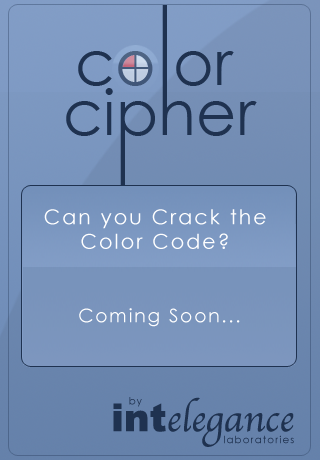
<style>
.page{position:relative;width:320px;height:460px}
.page>*{position:absolute;margin:0}
.t1{font:62.4px "CenturyGothic";color:#1f3250}
.t2{font:20.5px "CenturyGothic";letter-spacing:0.1em;color:#ffffff}
.t3{font:18.6px "CenturyGothic";letter-spacing:0.1em;color:#ffffff}
.t4{font:38.4px "Apple-Chancery";color:#1f3250}
.t5{font:38.4px "Arial-Black";color:#1f3250}
.t6{font:10.4px "CenturyGothic";letter-spacing:0.1em;color:#1f3250}
</style>
<div class="page">
<p class="t1" style="left:78px;top:51px;width:156px;height:35px">co or</p>
<p class="t1" style="left:66px;top:88px;width:191px;height:59px">cipher</p>
<p class="t2" style="left:44px;top:209px;width:222px;height:40px;text-align:center">Can you Crack the<br>Color Code?</p>
<p class="t3" style="left:79px;top:308px;width:161px;height:19px">Coming Soon...</p>
<p class="t4" style="left:113px;top:397px;width:181px;height:50px"><span class="t5">int</span>elegance</p>
<p class="t6" style="left:129px;top:397px;width:13px;height:10px">by</p>
<p class="t6" style="left:224px;top:435px;width:70px;height:9px">laboratories</p>
</div>
